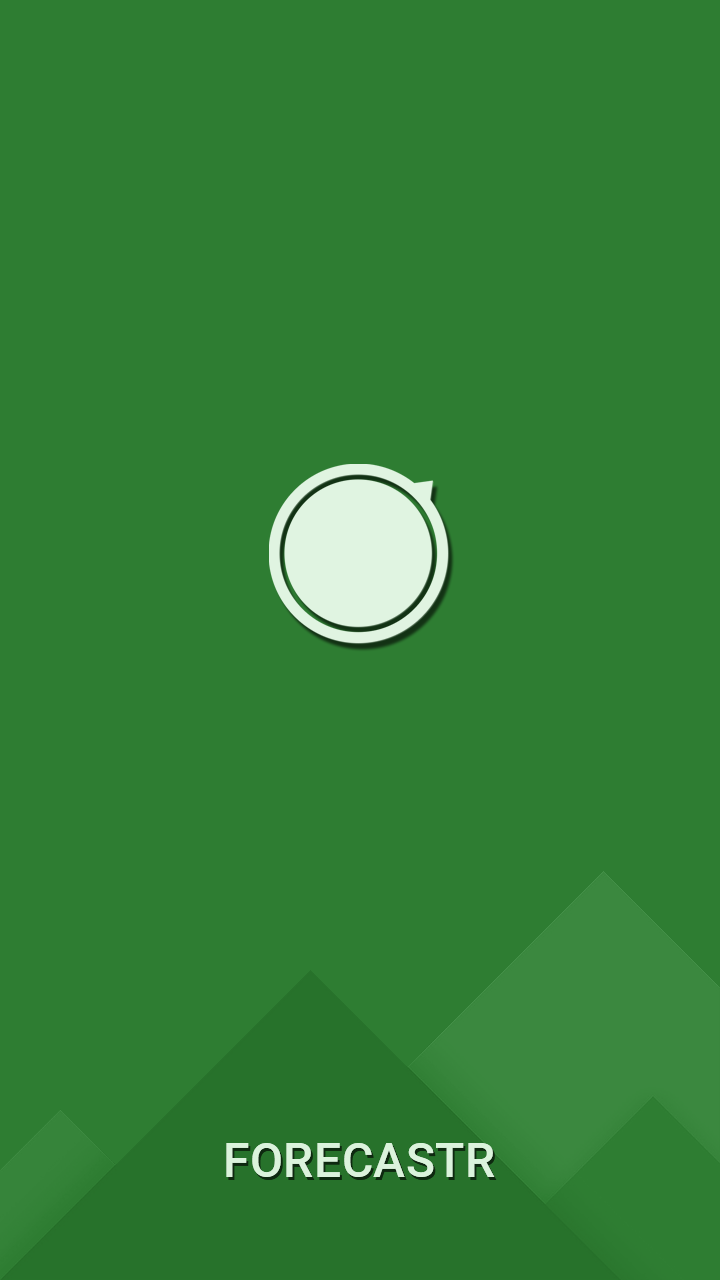
<style>
.page{position:relative;width:720px;height:1280px;background:#2e7d32}
.page>*{position:absolute;margin:0}
.t1{font:48px "Roboto-Medium";letter-spacing:0.01em;color:#dbf3dc;text-transform:uppercase}
</style>
<div class="page">
<p class="t1" style="left:226px;top:1143px;width:269px;height:34px">FORECASTR</p>
</div>
